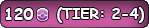
<style>
.page{position:relative;width:149px;height:28px}
.page>*{position:absolute;margin:0}
.t1{font:12px "ComicSansMS-Bold";color:#ffffff}
.t2{font:14.7px "ComicSansMS-Bold";color:#ffffff}
</style>
<div class="page">
<p class="t1" style="left:5px;top:8px;width:29px;height:12px">120</p>
<p class="t2" style="left:57px;top:7px;width:87px;height:16px">(TIER: 2-4)</p>
</div>
